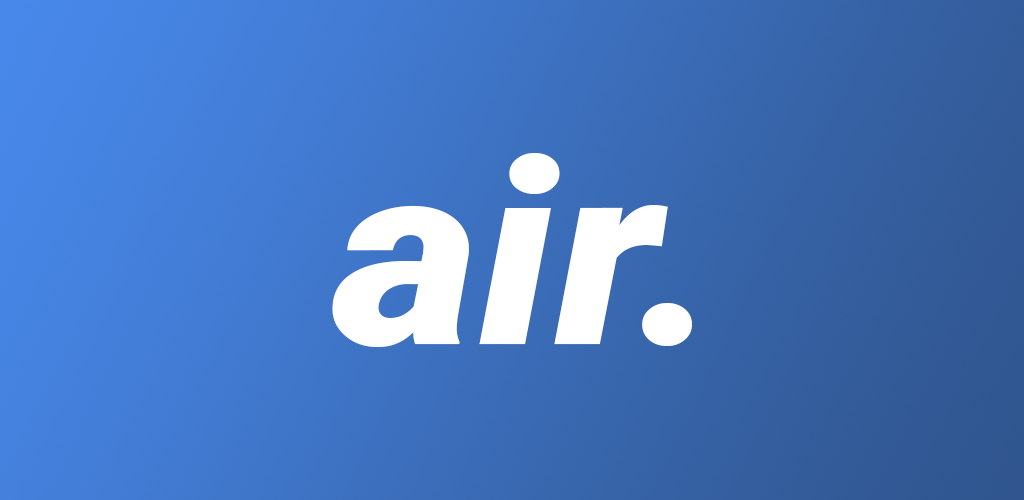
<style>
.page{position:relative;width:1024px;height:500px}
.page>*{position:absolute;margin:0}
.t1{font:256.8px "Roboto-BlackItalic";color:#ffffff;scale:1.1 1}
</style>
<div class="page">
<p class="t1" style="left:332px;top:153px;width:360px;height:194px">air.</p>
</div>
